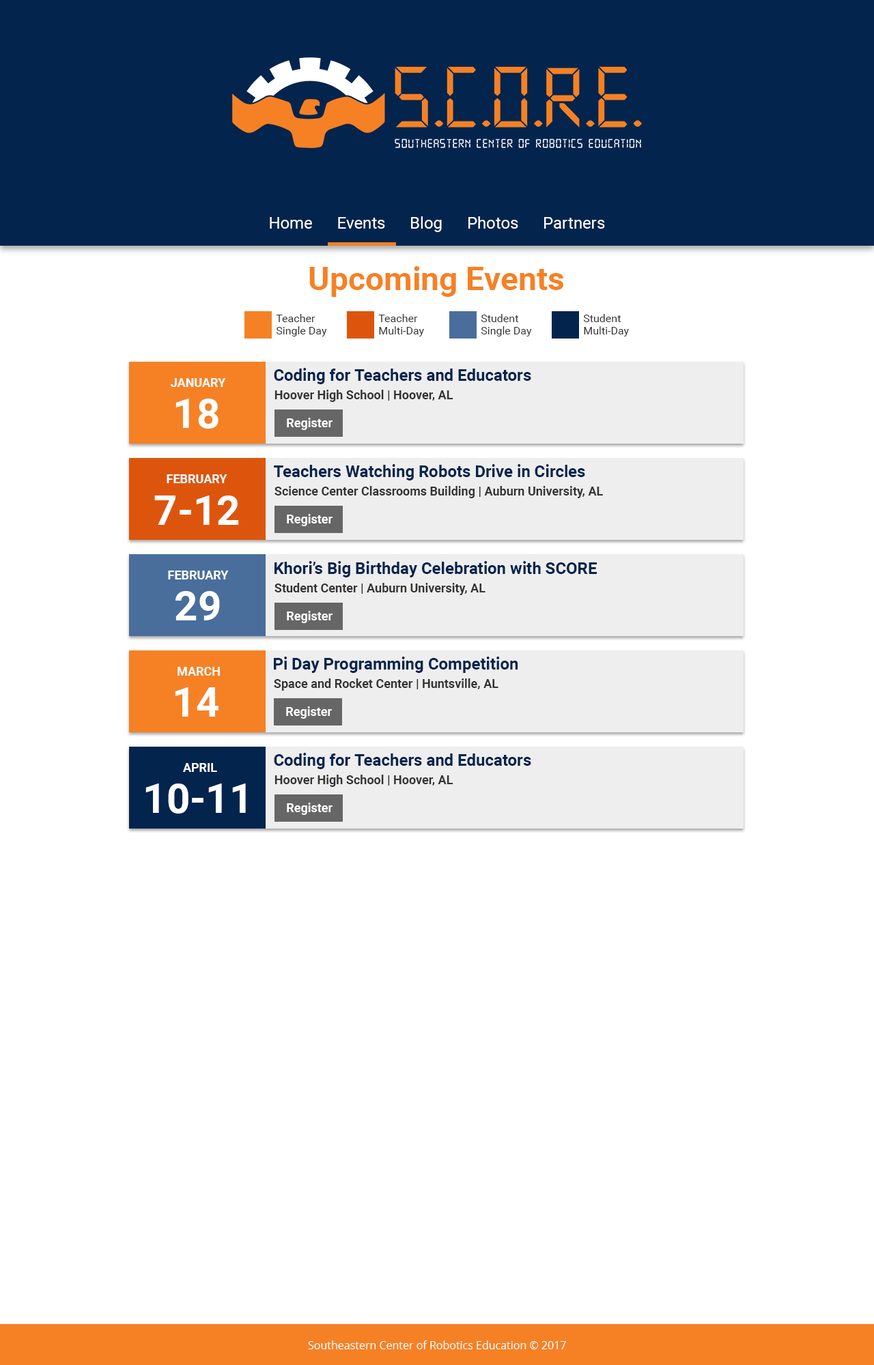
<style>
.page{position:relative;width:874px;height:1365px;background:#ffffff}
.page>*{position:absolute;margin:0}
.t1{font:16.4px "Roboto-Regular";color:#ffffff}
.t2{font:32.8px "Roboto-Bold";color:#f58124}
.t3{font:10.9px/12.3px "Roboto-Regular";color:#333333}
.t4{font:16.4px "Roboto-Bold";color:#03244d}
.t5{font:12.3px "Roboto-Bold";color:#ffffff}
.t6{font:12.3px "Roboto-Bold";color:#333333}
.t7{font:40.9px "Roboto-Bold";color:#ffffff}
.t8{font:10.9px "OpenSans";color:#ffffff}
</style>
<div class="page">
<p class="t1" style="left:270px;top:216px;width:335px;height:16px">Home      Events      Blog      Photos      Partners</p>
<p class="t2" style="left:309px;top:266px;width:254px;height:31px">Upcoming Events</p>
<p class="t3" style="left:276px;top:314px;width:51px;height:22px">Teacher<br>Single Day</p>
<p class="t3" style="left:378px;top:314px;width:46px;height:22px">Teacher<br>Multi-Day</p>
<p class="t3" style="left:480px;top:314px;width:52px;height:22px">Student<br>Single Day</p>
<p class="t3" style="left:583px;top:314px;width:46px;height:22px">Student<br>Multi-Day</p>
<p class="t4" style="left:274px;top:368px;width:257px;height:16px">Coding for Teachers and Educators</p>
<p class="t5" style="left:171px;top:378px;width:55px;height:9px">JANUARY</p>
<p class="t6" style="left:274px;top:390px;width:179px;height:12px">Hoover High School | Hoover, AL</p>
<p class="t7" style="left:175px;top:399px;width:43px;height:30px">18</p>
<p class="t5" style="left:287px;top:418px;width:45px;height:12px">Register</p>
<p class="t4" style="left:274px;top:464px;width:311px;height:16px">Teachers Watching Robots Drive in Circles</p>
<p class="t5" style="left:167px;top:474px;width:60px;height:9px">FEBRUARY</p>
<p class="t6" style="left:274px;top:486px;width:329px;height:12px">Science Center Classrooms Building | Auburn University, AL</p>
<p class="t7" style="left:154px;top:495px;width:85px;height:30px">7-12</p>
<p class="t5" style="left:287px;top:514px;width:45px;height:12px">Register</p>
<p class="t4" style="left:274px;top:561px;width:322px;height:16px">Khori’s Big Birthday Celebration with SCORE</p>
<p class="t5" style="left:168px;top:571px;width:61px;height:8px">FEBRUARY</p>
<p class="t7" style="left:175px;top:591px;width:45px;height:29px">29</p>
<p class="t6" style="left:274px;top:583px;width:211px;height:12px">Student Center | Auburn University, AL</p>
<p class="t5" style="left:287px;top:611px;width:45px;height:12px">Register</p>
<p class="t4" style="left:274px;top:657px;width:244px;height:16px">Pi Day Programming Competition</p>
<p class="t5" style="left:177px;top:667px;width:43px;height:9px">MARCH</p>
<p class="t7" style="left:175px;top:687px;width:43px;height:30px">14</p>
<p class="t6" style="left:274px;top:678px;width:224px;height:13px">Space and Rocket Center | Huntsville, AL</p>
<p class="t5" style="left:286px;top:706px;width:46px;height:13px">Register</p>
<p class="t4" style="left:274px;top:753px;width:257px;height:16px">Coding for Teachers and Educators</p>
<p class="t5" style="left:183px;top:763px;width:34px;height:9px">APRIL</p>
<p class="t7" style="left:145px;top:783px;width:101px;height:31px">10-11</p>
<p class="t6" style="left:274px;top:775px;width:179px;height:12px">Hoover High School | Hoover, AL</p>
<p class="t5" style="left:287px;top:803px;width:45px;height:12px">Register</p>
<p class="t8" style="left:308px;top:1340px;width:258px;height:9px">Southeastern Center of Robotics Education © 2017</p>
</div>
